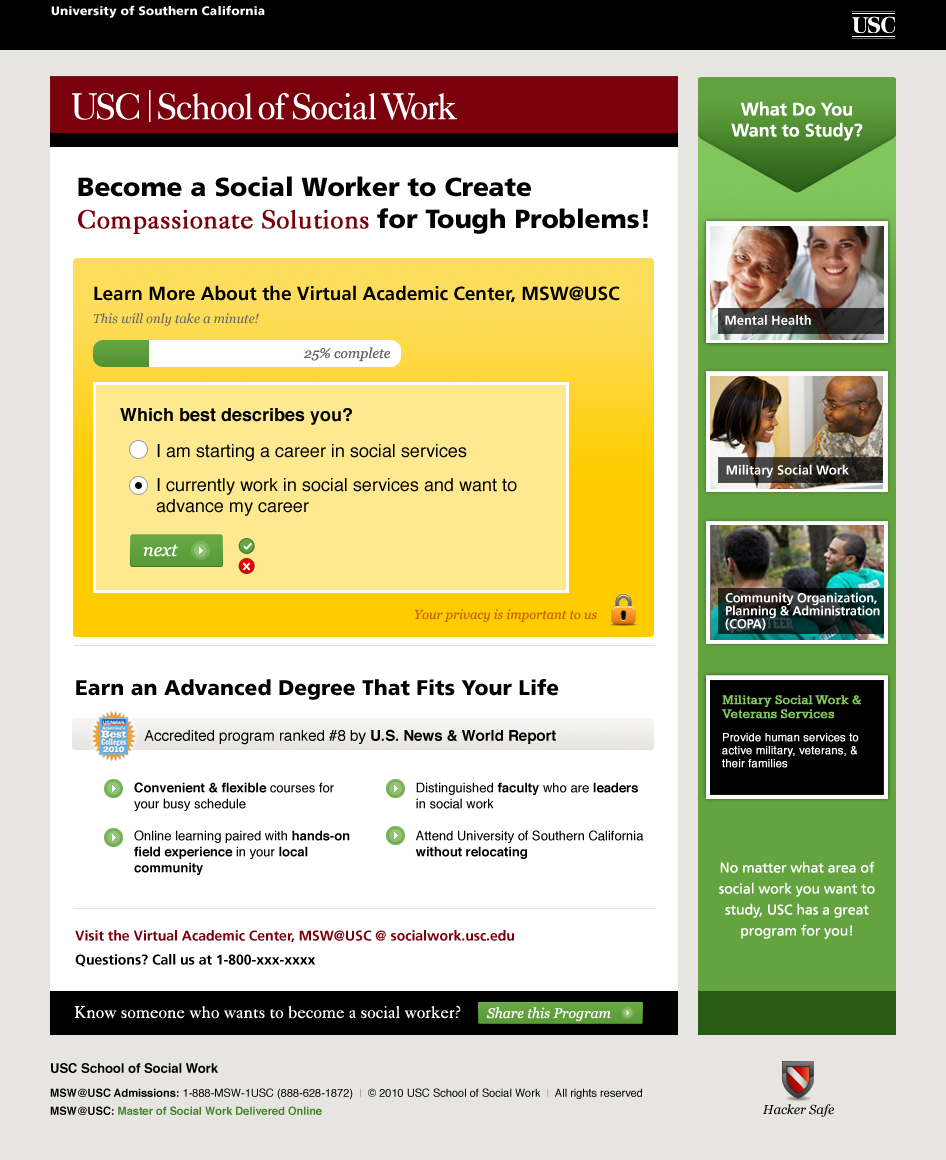
<style>
.page{position:relative;width:946px;height:1160px;background:#ffffff}
.page>*{position:absolute;margin:0}
.t1{font:18px/21px "Frutiger-Bold";color:#ffffff}
.t2{font:26px/32px "Frutiger-Black";color:#000000}
.t3{font:26px/32px "Caslon540LTStd-Roman";color:#7a000e;font-weight:bold}
.t4{font:19px/21px "Frutiger-Bold";color:#000000}
.t5{font:13px/23px "Georgia-Italic";color:#666666}
.t6{font:13px "Frutiger-Bold";color:#ffffff}
.t7{font:14px "Georgia-Italic";color:#666666}
.t8{font:18px/28px "Helvetica";color:#000000}
.t9{font:18px/24px "Helvetica-Bold";color:#000000}
.t10{font:18px/24px "Helvetica";color:#000000}
.t11{font:18px/21px "Helvetica";color:#000000}
.t12{font:18px "Georgia-Italic";color:#ffffff}
.t13{font:13px/13px "Frutiger-Bold";letter-spacing:-0.02em;color:#ffffff}
.t14{font:13px "Georgia-Italic";color:#cc6600}
.t15{font:21px "Frutiger-Black";color:#000000}
.t16{font:11px/13px "Helvetica";color:#ffffff;font-weight:bold}
.t17{font:13px/14px "Rockwell";color:#81c65d;font-weight:bold}
.t18{font:15px "Helvetica";color:#000000}
.t19{font:15px "Helvetica-Bold";color:#000000}
.t20{font:13px/16px "Helvetica";color:#000000}
.t21{font:13px/16px "Helvetica-Bold";color:#000000}
.t22{font:14px/21px "Frutiger-Roman";color:#ffffff}
.t23{font:14px/24px "Frutiger-Bold";color:#7a000e}
.t24{font:14px/24px "Frutiger-Bold";color:#000000}
.t25{font:17px "Caslon540LTStd-Roman";color:#ffffff}
.t26{font:14px "Georgia-Italic";color:#ffffff}
.t27{font:11px/18px "Helvetica-Bold";color:#438327}
.t28{font:13px/14px "Helvetica-Bold";color:#000000}
.t29{font:11px/24px "Helvetica-Bold";color:#000000}
.t30{font:11px/24px "Helvetica";color:#000000}
.t31{font:11px/24px "Helvetica";color:#999999}
.t32{font:11px/18px "Helvetica-Bold";color:#000000}
.t33{font:13px "Georgia-Italic";color:#000000}
</style>
<div class="page">
<p class="t1" style="left:731px;top:101px;width:132px;height:40px;text-align:center">What Do You<br>Want to Study?</p>
<p class="t2" style="left:78px;top:176px;width:570px;height:58px">Become a Social Worker to Create  <br><span class="t3">Compassionate Solutions </span>for Tough Problems!</p>
<p class="t4" style="left:93px;top:285px;width:527px;height:41px">Learn More About the Virtual Academic Center, MSW@USC<br><span class="t5">This will only take a minute!</span></p>
<p class="t6" style="left:725px;top:315px;width:86px;height:10px">Mental Health</p>
<p class="t7" style="left:303px;top:347px;width:88px;height:15px">25% complete</p>
<p class="t8" style="left:120px;top:408px;width:397px;height:108px"><span class="t9">Which best describes you?<br><br></span><span class="t10"> I am starting a career in social services<br><br></span> I currently work in social services and want to  <span class="t11"> advance my career</span></p>
<p class="t6" style="left:726px;top:464px;width:123px;height:14px">Military Social Work</p>
<p class="t12" style="left:143px;top:544px;width:35px;height:13px">next</p>
<p class="t13" style="left:725px;top:592px;width:155px;height:39px">Community Organization,<br>Planning &amp; Administration <br>(COPA)</p>
<p class="t14" style="left:414px;top:609px;width:183px;height:13px">Your privacy is important to us</p>
<p class="t15" style="left:76px;top:679px;width:483px;height:21px">Earn an Advanced Degree That Fits Your Life</p>
<p class="t16" style="left:722px;top:695px;width:139px;height:73px"><span class="t17">Military Social Work &amp; Veterans Services<br><br></span>Provide human services to active military, veterans, &amp; their families</p>
<p class="t18" style="left:144px;top:729px;width:412px;height:16px">Accredited program ranked #8 by <span class="t19">U.S. News &amp; World Report</span></p>
<p class="t20" style="left:134px;top:782px;width:216px;height:93px"><span class="t21">Convenient &amp; flexible </span>courses for your busy schedule<br><br>Online learning paired with <span class="t21">hands-on field experience</span> in your <span class="t21">local community</span></p>
<p class="t20" style="left:415px;top:782px;width:229px;height:77px">Distinguished <span class="t21">faculty</span> who are <span class="t21">leaders</span><br>in social work<br><br>Attend University of Southern California <span class="t21">without relocating</span></p>
<p class="t22" style="left:719px;top:861px;width:156px;height:78px;text-align:center">No matter what area of social work you want to study, USC has a great<br>program for you!</p>
<p class="t23" style="left:75px;top:930px;width:439px;height:37px">Visit the Virtual Academic Center, MSW@USC @ socialwork.usc.edu<br><span class="t24">Questions? Call us at 1-800-xxx-xxxx</span></p>
<p class="t25" style="left:75px;top:1005px;width:386px;height:14px">Know someone who wants to become a social worker?</p>
<p class="t26" style="left:486px;top:1007px;width:125px;height:15px">Share this Program</p>
<p class="t27" style="left:50px;top:1063px;width:592px;height:52px"><span class="t28">USC School of Social Work<br></span><span class="t29">MSW@USC Admissions: </span><span class="t30">1-888-MSW-1USC (888-628-1872)</span><span class="t31">  |  </span><span class="t30">© 2010 USC School of Social Work</span><span class="t31">  |  </span><span class="t30">All rights reserved<br></span><span class="t32">MSW@USC: </span>Master of Social Work Delivered Online</p>
<p class="t33" style="left:762px;top:1104px;width:72px;height:13px">Hacker Safe</p>
</div>
